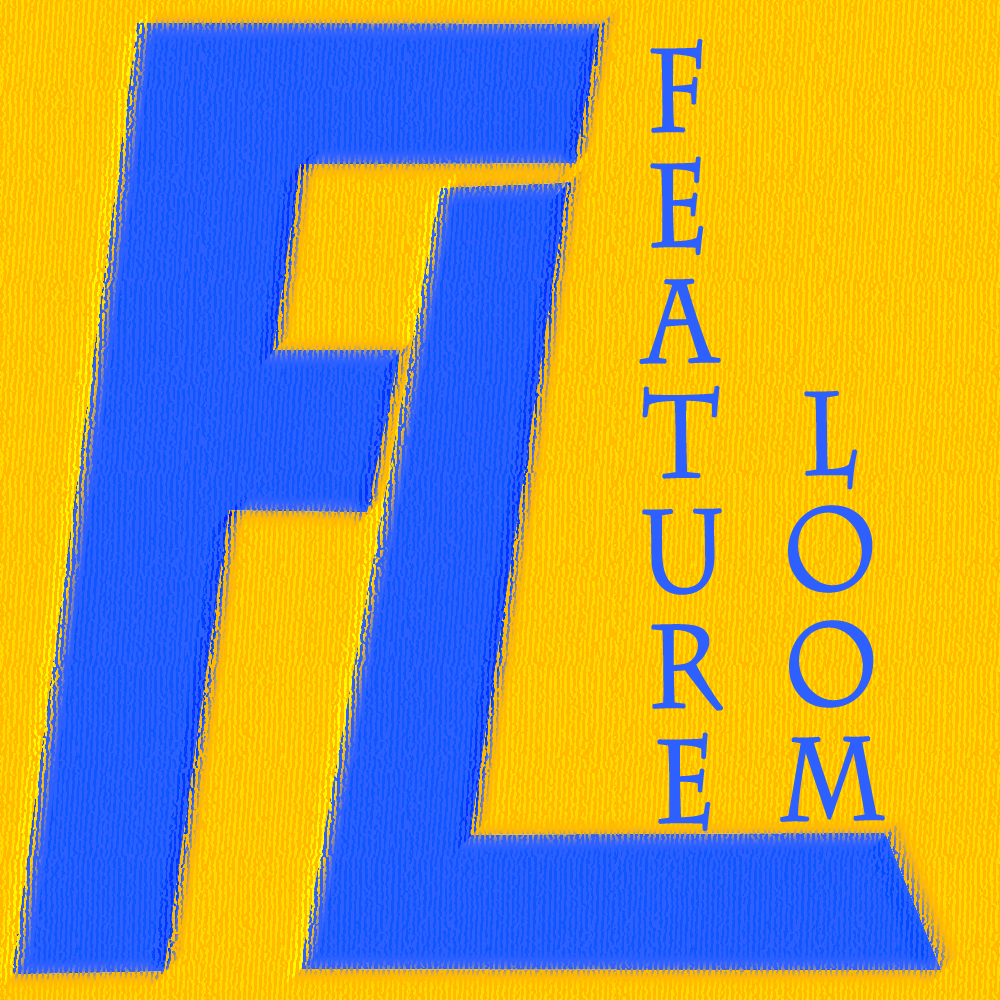
<style>
.page{position:relative;width:1000px;height:1000px;background:#ffba00}
.page>*{position:absolute;margin:0}
.t1{font:115.1px/169.3px "CharlemagneStd-Regular";color:#2e5fff;font-weight:bold;scale:0.87 1}
</style>
<div class="page">
<p class="t1" style="left:639px;top:38px;width:246px;height:794px;text-align:right;rotate:-1deg">LOOM<br>FEATURE</p>
</div>
